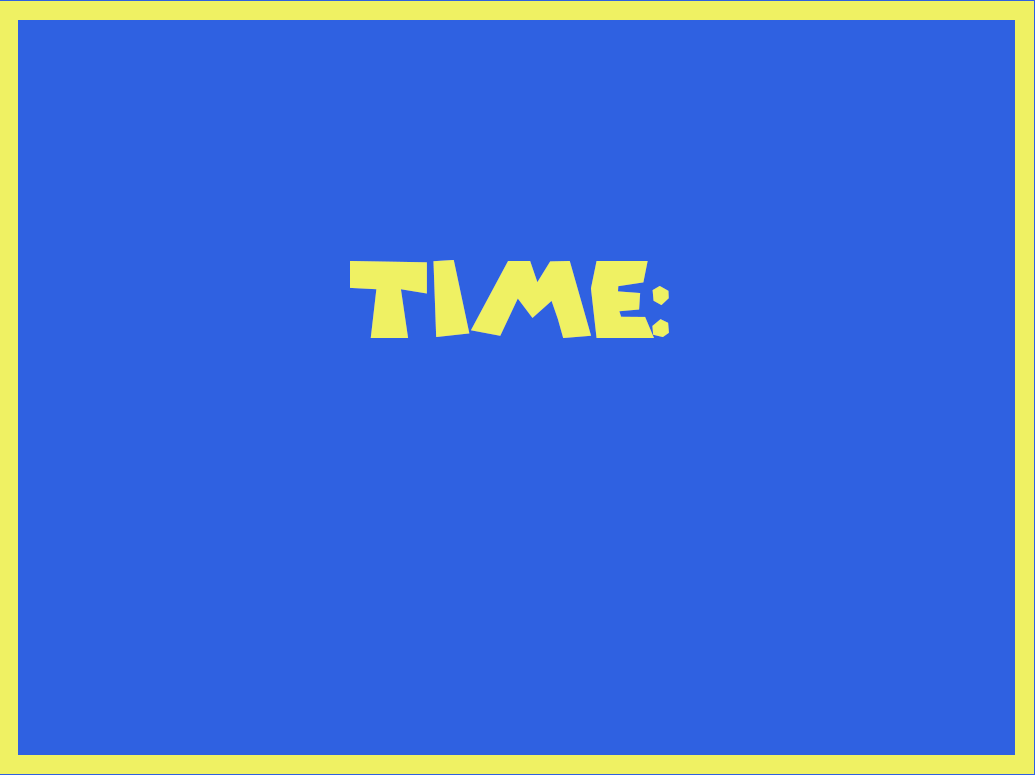
<style>
.page{position:relative;width:1035px;height:775px;background:#2f61e1}
.page>*{position:absolute;margin:0}
.t1{font:104.2px "SuperMarioGalaxy";color:#eff163}
</style>
<div class="page">
<p class="t1" style="left:350px;top:260px;width:319px;height:78px">Time:</p>
</div>
